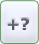
<style>
.page{position:relative;width:39px;height:44px}
.page>*{position:absolute;margin:0}
.t1{font:16px "Verdana-Bold";color:#5c5e63}
</style>
<div class="page">
<p class="t1" style="left:7px;top:18px;width:22px;height:12px">+?</p>
</div>
